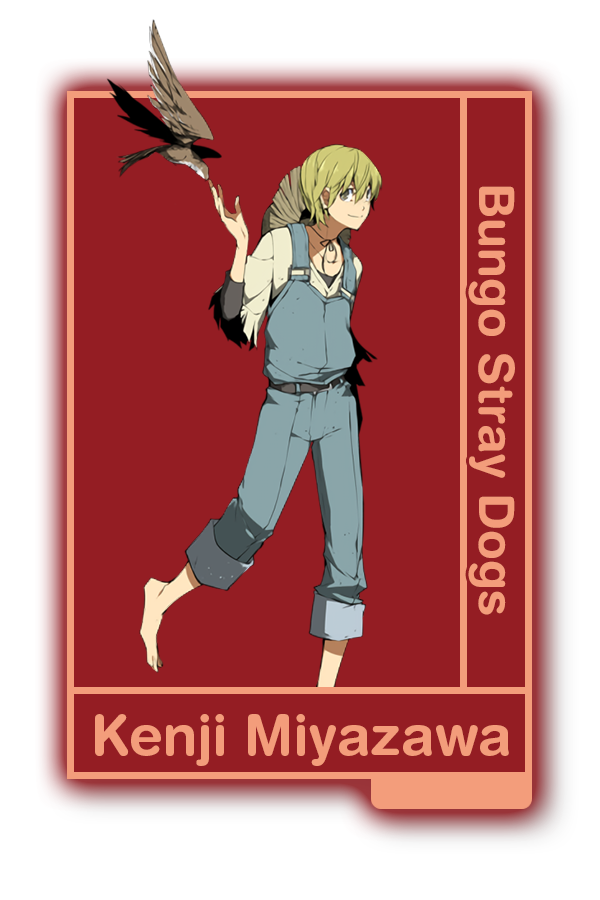
<style>
.page{position:relative;width:600px;height:900px;background:#941d23}
.page>*{position:absolute;margin:0}
.t1{font:48.8px "HelveticaRounded-Bold";color:#f39d7b}
.t2{font:55.4px "HelveticaRounded-Bold";color:#f39d7b}
</style>
<div class="page">
<p class="t1" style="left:468px;top:186px;width:47px;height:429px;rotate:90deg">Bungo Stray Dogs</p>
<p class="t2" style="left:95px;top:714px;width:414px;height:52px">Kenji Miyazawa</p>
</div>
